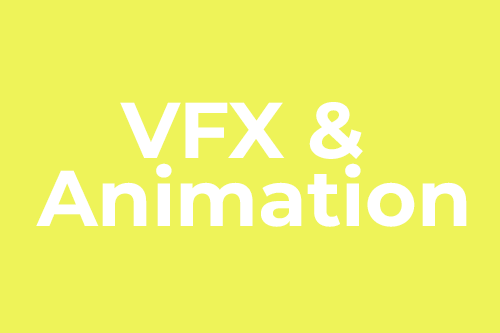
<style>
.page{position:relative;width:500px;height:333px;background:#eef359}
.page>*{position:absolute;margin:0}
.t1{font:79px/68px "Montserrat-Bold";color:#ffffff}
</style>
<div class="page">
<p class="t1" style="left:36px;top:102px;width:431px;height:125px;text-align:center">VFX &amp; <br>Animation</p>
</div>
